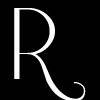
<style>
.page{position:relative;width:100px;height:100px;background:#010101}
.page>*{position:absolute;margin:0}
.t1{font:116.4px "Riesling";color:#fcfcfc}
</style>
<div class="page">
<p class="t1" style="left:14px;top:8px;width:72px;height:93px">R</p>
</div>
